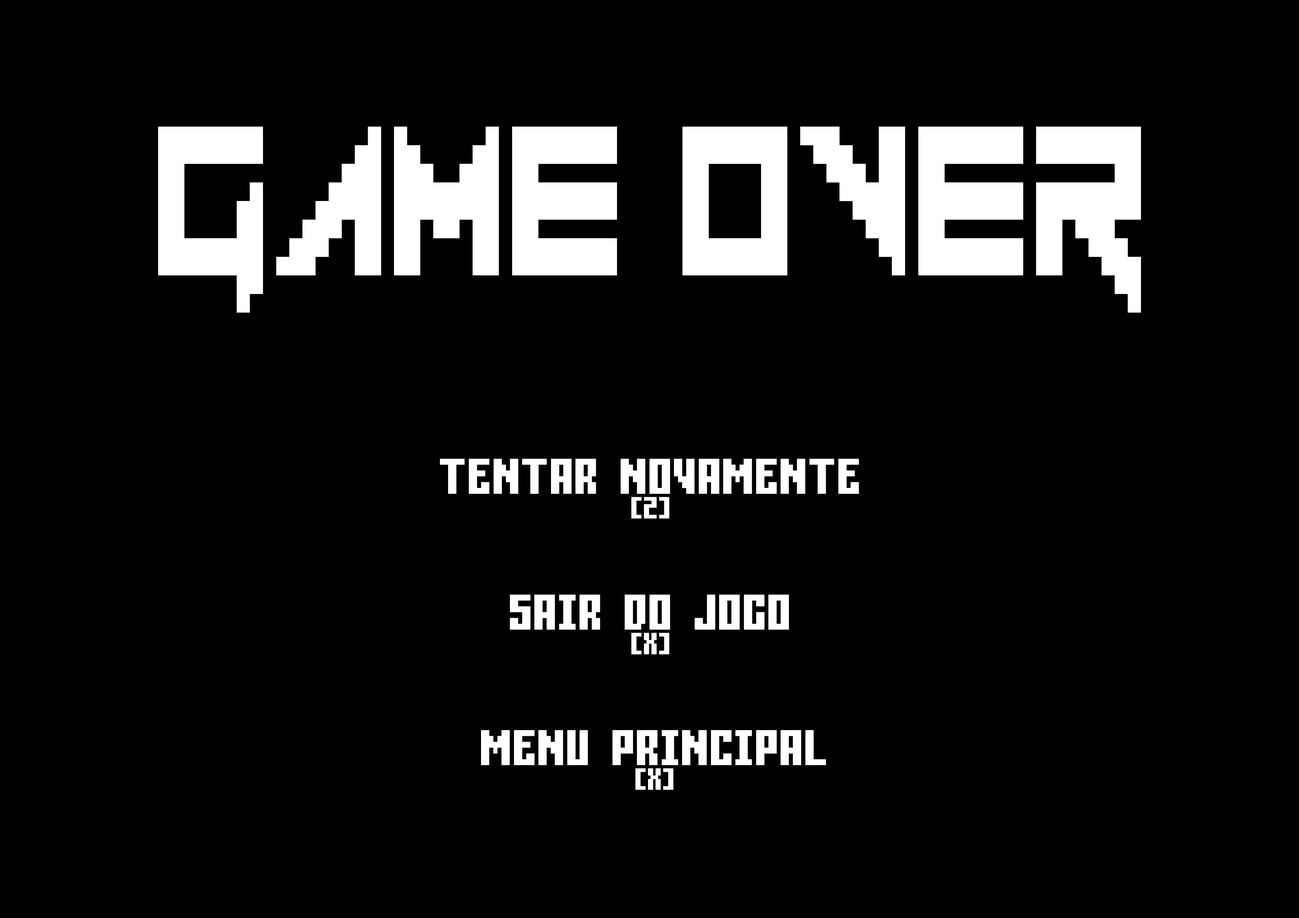
<style>
.page{position:relative;width:1299px;height:918px;background:#000000}
.page>*{position:absolute;margin:0}
.t1{font:297.6px "Vermin-Vibes-1989";color:#ffffff;text-transform:uppercase;scale:0.7 1}
.t2{font:93.2px/38.6px "Gamer";color:#ffffff;scale:0.7 1}
.t3{font:57.1px/24.7px "Gamer";color:#ffffff;scale:0.7 1}
.t4{font:93.2px "Gamer";color:#ffffff;scale:0.7 1}
</style>
<div class="page">
<p class="t1" style="left:158px;top:127px;width:983px;height:186px">GAME OVER</p>
<p class="t2" style="left:440px;top:459px;width:419px;height:60px;text-align:center">TENTAR NOVAMENTE<br><span class="t3">[Z]</span></p>
<p class="t4" style="left:510px;top:595px;width:279px;height:60px;text-align:center">SAIR DO JOGO<br><span class="t3">[X]</span></p>
<p class="t4" style="left:481px;top:730px;width:345px;height:60px;text-align:center">MENU PRINCIPAL<br><span class="t3">[X]</span></p>
</div>
